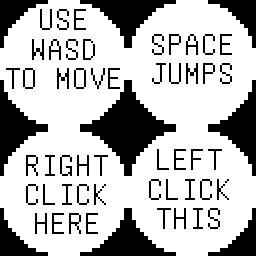
<style>
.page{position:relative;width:256px;height:256px;background:#ffffff}
.page>*{position:absolute;margin:0}
.t1{font:33.3px/29.2px "UnifontMedium";color:#000000}
</style>
<div class="page">
<p class="t1" style="left:6px;top:9px;width:114px;height:80px;text-align:center">USE<br>WASD<br>TO MOVE</p>
<p class="t1" style="left:152px;top:34px;width:80px;height:50px;text-align:center">SPACE<br>JUMPS</p>
<p class="t1" style="left:149px;top:149px;width:80px;height:80px;text-align:center">LEFT<br>CLICK<br>THIS GUY</p>
<p class="t1" style="left:26px;top:155px;width:82px;height:79px;text-align:center">RIGHT<br>CLICK<br>HERE</p>
</div>
